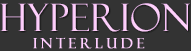
<style>
.page{position:relative;width:191px;height:51px;background:#333333}
.page>*{position:absolute;margin:0}
.t1{font:38px "FelixTitlingMT";color:#ffcfff}
.t2{font:14px "FelixTitlingMT";letter-spacing:0.26em;color:#ffcfff;font-weight:bold}
</style>
<div class="page">
<p class="t1" style="left:0px;top:3px;width:190px;height:29px">HYPERION</p>
<p class="t2" style="left:33px;top:37px;width:112px;height:12px">INTERLUDE</p>
</div>
